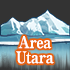
<style>
.page{position:relative;width:70px;height:70px;background:#333333}
.page>*{position:absolute;margin:0}
.t1{font:16px/15px "RyuminPro-ExBold";letter-spacing:-0.04em;color:#ffffff;scale:0.9 1}
</style>
<div class="page">
<p class="t1" style="left:16px;top:36px;width:38px;height:28px;text-align:center">Area<br>Utara</p>
</div>
